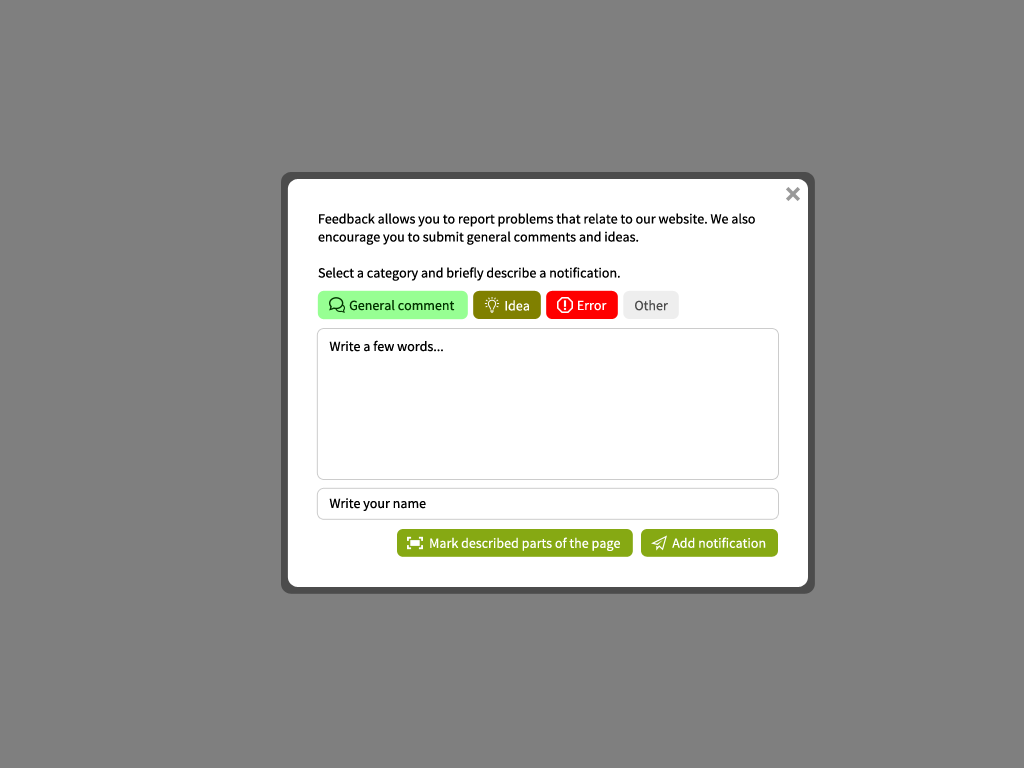
<style>
.page{position:relative;width:1024px;height:768px;background:#7f7f7f}
.page>*{position:absolute;margin:0}
.t1{font:14px/18px "SourceSansPro-Regular";color:#000000}
.t2{font:14px "SourceSansPro-Regular";color:#023400}
.t3{font:14px "SourceSansPro-Regular";color:#ffffff}
.t4{font:14px "SourceSansPro-Regular";color:#4c4c4c}
.t5{font:14px "SourceSansPro-Regular";color:#000000}
</style>
<div class="page">
<p class="t1" style="left:318px;top:213px;width:437px;height:68px;text-align:justify">Feedback allows you to report problems that relate to our website. We also<br>encourage you to submit general comments and ideas.<br><br>Select a category and briefly describe a notification.</p>
<p class="t2" style="left:349px;top:300px;width:106px;height:11px">General comment</p>
<p class="t3" style="left:505px;top:300px;width:24px;height:11px">Idea</p>
<p class="t3" style="left:578px;top:300px;width:29px;height:11px">Error</p>
<p class="t4" style="left:635px;top:300px;width:33px;height:11px">Other</p>
<p class="t5" style="left:329px;top:340px;width:114px;height:12px">Write a few words...</p>
<p class="t5" style="left:329px;top:498px;width:97px;height:13px">Write your name</p>
<p class="t3" style="left:430px;top:537px;width:190px;height:14px">Mark described parts of the page</p>
<p class="t3" style="left:672px;top:537px;width:94px;height:11px">Add notification</p>
</div>
